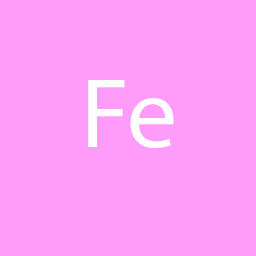
<style>
.page{position:relative;width:256px;height:256px;background:#ff9bf9}
.page>*{position:absolute;margin:0}
.t1{font:100px "MyriadPro-Regular";color:#ffffff}
</style>
<div class="page">
<p class="t1" style="left:88px;top:80px;width:86px;height:68px">Fe</p>
</div>
